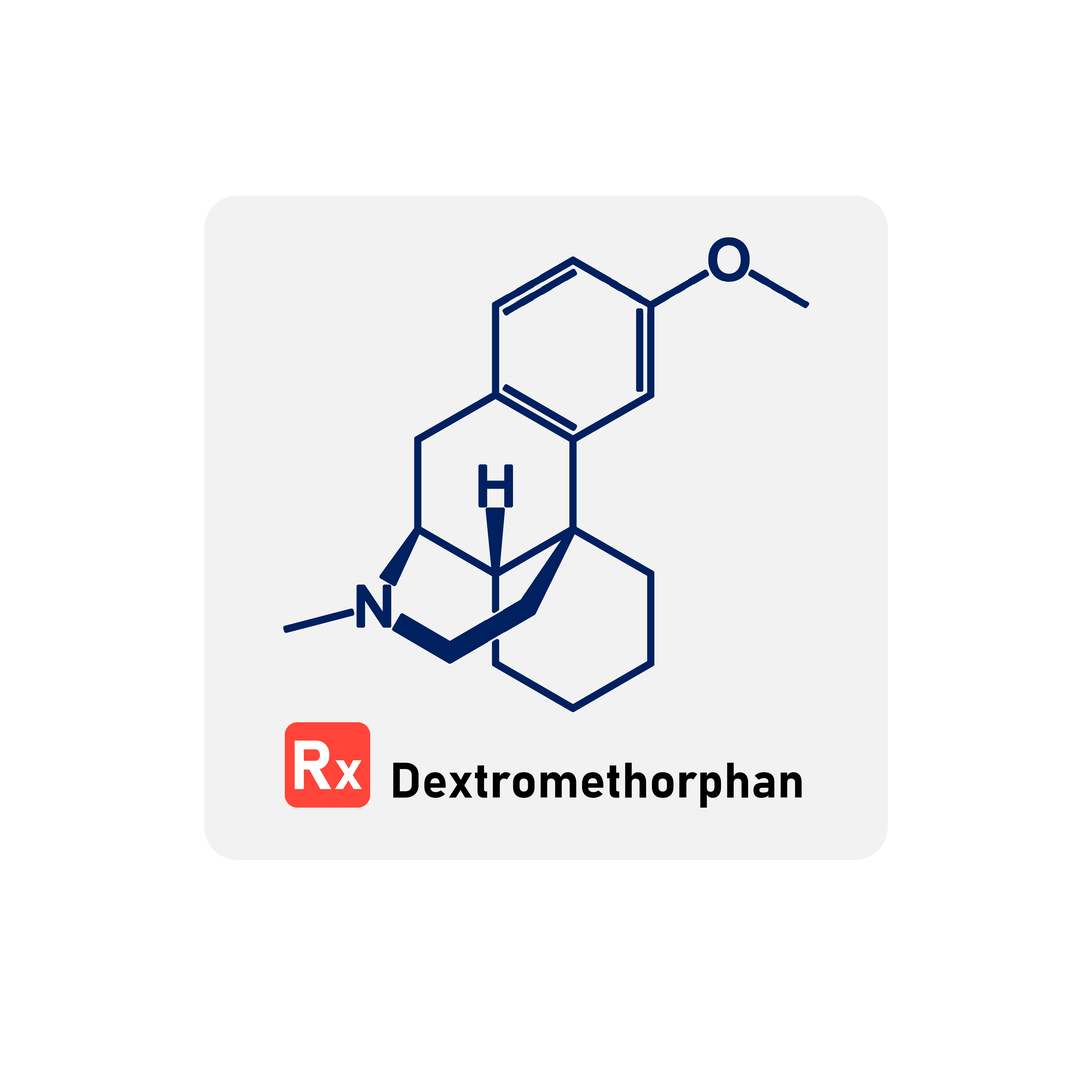
<style>
.page{position:relative;width:1092px;height:1092px;background:#ffffff}
.page>*{position:absolute;margin:0}
.t1{font:49.2px "Bahnschrift-Bold";color:#000000}
</style>
<div class="page">
<p class="t1" style="left:393px;top:763px;width:409px;height:45px">Dextromethorphan</p>
</div>
